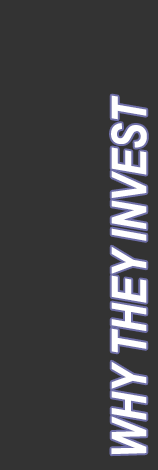
<style>
.page{position:relative;width:158px;height:470px;background:#333333}
.page>*{position:absolute;margin:0}
.t1{font:48px "ArialNarrow-BoldItalic";color:#ffffff}
</style>
<div class="page">
<p class="t1" style="left:111px;top:95px;width:36px;height:360px;rotate:-90deg">WHY THEY INVEST</p>
</div>
